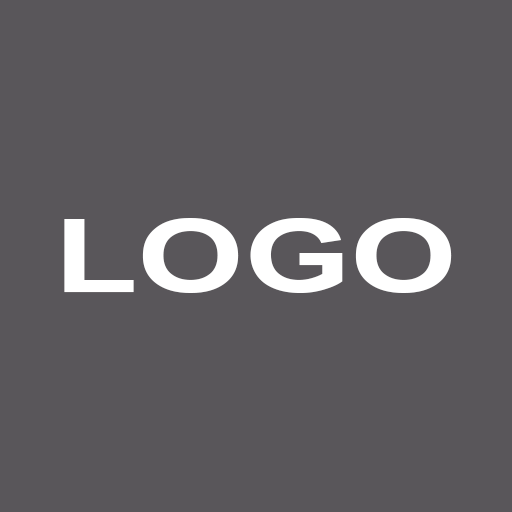
<style>
.page{position:relative;width:512px;height:512px;background:#59565a}
.page>*{position:absolute;margin:0}
.t1{font:102.2px "Arial-BoldMT";color:#ffffff;scale:1.34 1}
</style>
<div class="page">
<p class="t1" style="left:64px;top:218px;width:388px;height:75px">LOGO</p>
</div>
